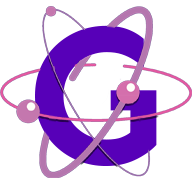
<style>
.page{position:relative;width:192px;height:192px;background:#ffffff}
.page>*{position:absolute;margin:0}
.t1{font:205.4px "Sen-Bold";color:#5700b8}
</style>
<div class="page">
<p class="t1" style="left:35px;top:25px;width:122px;height:141px">G</p>
</div>
